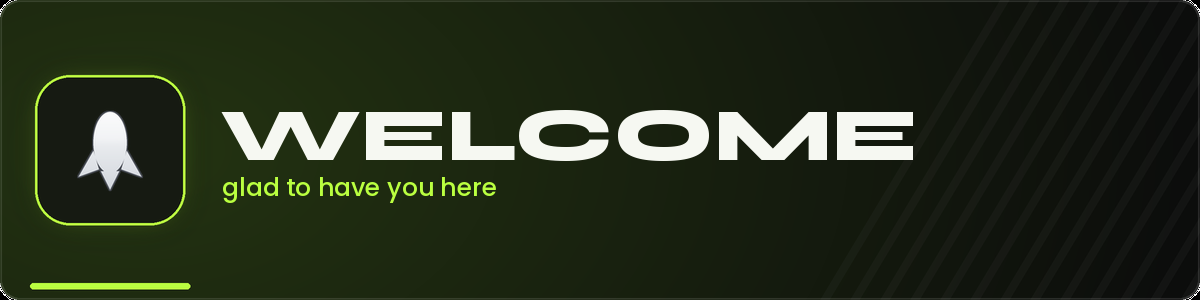
<style>
.page{position:relative;width:1200px;height:300px}
.page>*{position:absolute;margin:0}
.t1{font:75px "Syne-ExtraBold";color:#f6f8f2}
.t2{font:25px "Poppins-Medium";color:#baff40}
</style>
<div class="page">
<p class="t1" style="left:221px;top:110px;width:692px;height:51px">WELCOME</p>
<p class="t2" style="left:223px;top:177px;width:273px;height:26px">glad to have you here</p>
</div>
